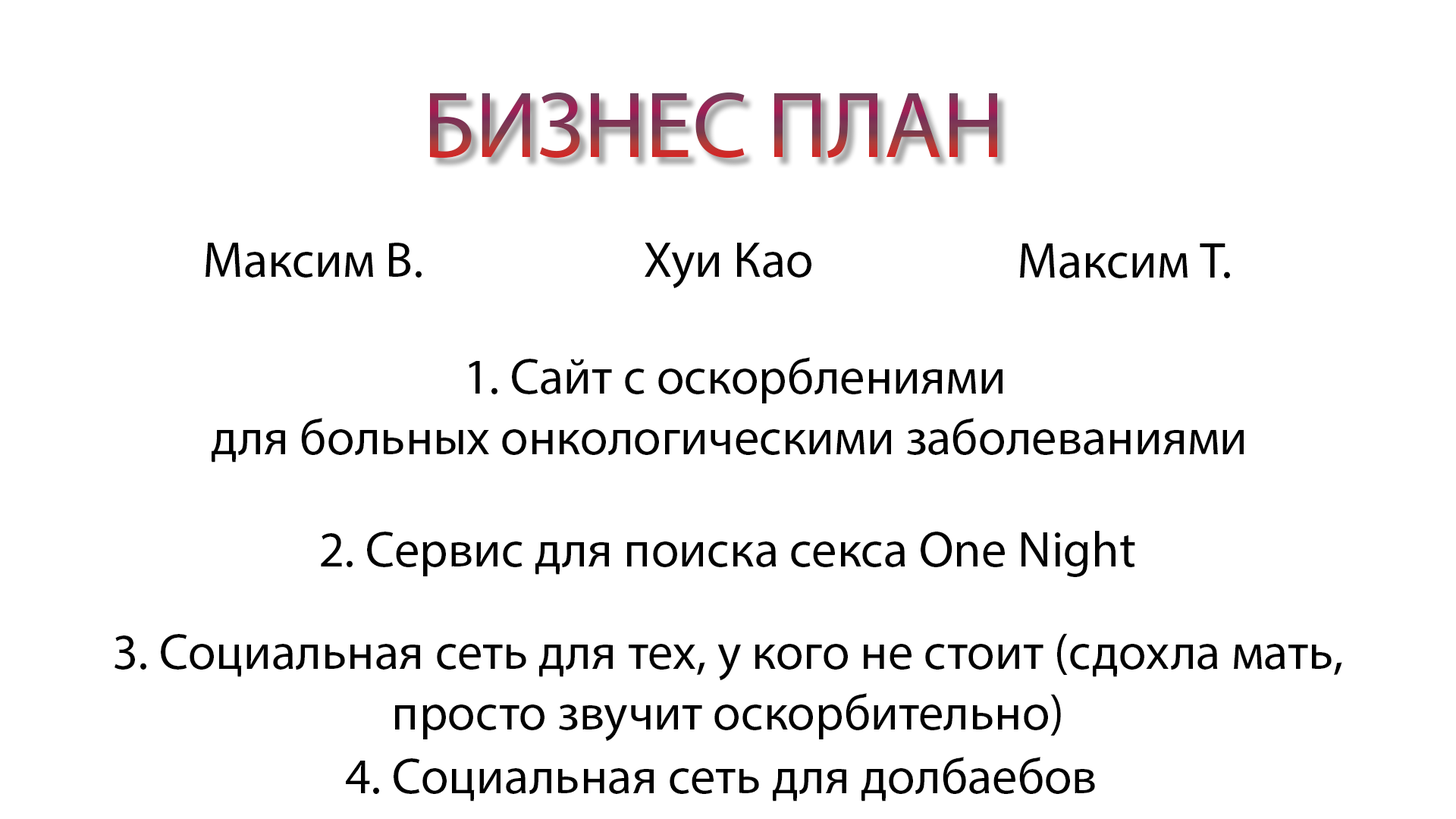
<style>
.page{position:relative;width:1456px;height:819px;background:#ffffff}
.page>*{position:absolute;margin:0}
.t1{font:94.8px "MyriadPro-Regular"}
.t2{font:50.6px "MyriadPro-Regular";color:#000000}
</style>
<div class="page">
<p class="t1" style="left:430px;top:92px;width:567px;height:66px">БИЗНЕС ПЛАН</p>
<p class="t2" style="left:206px;top:243px;width:216px;height:35px">Максим В.</p>
<p class="t2" style="left:645px;top:243px;width:166px;height:45px">Хуи Као</p>
<p class="t2" style="left:1020px;top:243px;width:210px;height:35px">Максим Т.</p>
<p class="t2" style="left:212px;top:357px;width:1032px;height:106px;text-align:center">1. Сайт с оскорблениями <br>для больных онкологическими заболеваниями</p>
<p class="t2" style="left:321px;top:531px;width:814px;height:46px">2. Сервис для поиска секса One Night</p>
<p class="t2" style="left:115px;top:633px;width:1227px;height:108px;text-align:center">3. Социальная сеть для тех, у кого не стоит (сдохла мать, <br>просто звучит оскорбительно)</p>
</div>
